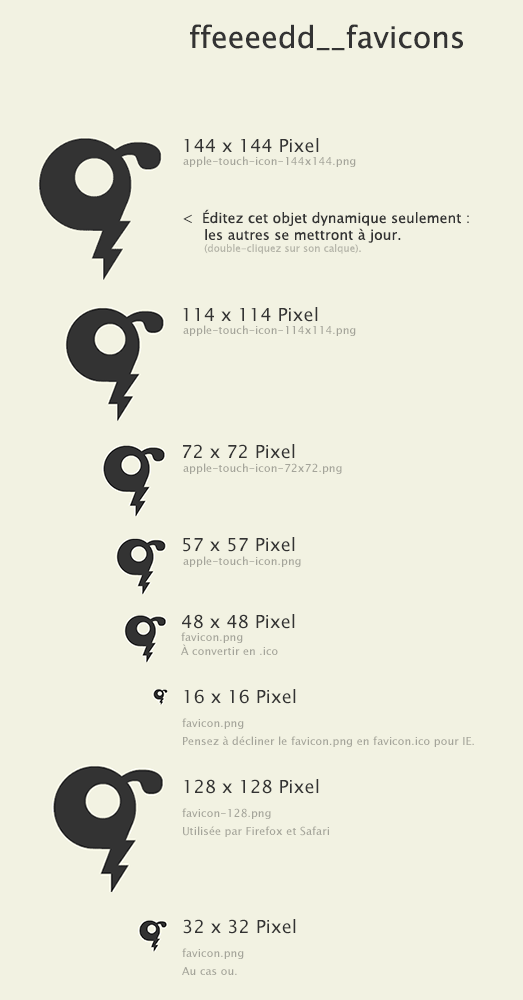
<style>
.page{position:relative;width:523px;height:1000px;background:#f2f2e2}
.page>*{position:absolute;margin:0}
.t1{font:30px "LucidaSansUnicode";color:#333333}
.t2{font:18px "LucidaSansUnicode";color:#333333}
.t3{font:11px "LucidaSansUnicode";color:#a4a49a}
.t4{font:14px "LucidaSansUnicode";color:#333333}
.t5{font:10px "LucidaSansUnicode";color:#b6b6aa}
.t6{font:11px/14px "LucidaSansUnicode";color:#a4a49a}
.t7{font:11px/18px "LucidaSansUnicode";color:#a4a49a}
</style>
<div class="page">
<p class="t1" style="left:190px;top:24px;width:273px;height:27px">ffeeeedd__favicons</p>
<p class="t2" style="left:184px;top:138px;width:135px;height:15px">144 x 144 Pixel</p>
<p class="t3" style="left:183px;top:156px;width:173px;height:11px">apple-touch-icon-144x144.png</p>
<p class="t4" style="left:183px;top:209px;width:286px;height:45px">&lt;  Éditez cet objet dynamique seulement :<br>     les autres se mettront à jour.<br><span class="t5">       (double-cliquez sur son calque).</span></p>
<p class="t2" style="left:183px;top:307px;width:135px;height:15px">114 x 114 Pixel</p>
<p class="t3" style="left:183px;top:325px;width:173px;height:11px">apple-touch-icon-114x114.png</p>
<p class="t2" style="left:183px;top:444px;width:112px;height:15px">72 x 72 Pixel</p>
<p class="t3" style="left:183px;top:463px;width:159px;height:11px">apple-touch-icon-72x72.png</p>
<p class="t2" style="left:183px;top:537px;width:112px;height:15px">57 x 57 Pixel</p>
<p class="t3" style="left:183px;top:556px;width:118px;height:11px">apple-touch-icon.png</p>
<p class="t2" style="left:182px;top:614px;width:113px;height:15px">48 x 48 Pixel</p>
<p class="t6" style="left:181px;top:632px;width:97px;height:23px">favicon.png<br>À convertir en .ico</p>
<p class="t2" style="left:184px;top:689px;width:112px;height:15px">16 x 16 Pixel</p>
<p class="t7" style="left:182px;top:718px;width:292px;height:29px">favicon.png<br>Pensez à décliner le favicon.png en favicon.ico pour IE.</p>
<p class="t2" style="left:184px;top:779px;width:135px;height:15px">128 x 128 Pixel</p>
<p class="t7" style="left:182px;top:808px;width:147px;height:29px">favicon-128.png<br>Utilisée par Firefox et Safari</p>
<p class="t2" style="left:183px;top:919px;width:113px;height:15px">32 x 32 Pixel</p>
<p class="t7" style="left:182px;top:948px;width:62px;height:27px">favicon.png<br>Au cas ou.</p>
</div>
